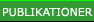
<style>
.page{position:relative;width:94px;height:22px;background:#339933}
.page>*{position:absolute;margin:0}
.t1{font:11px "Verdana";color:#ffffff}
</style>
<div class="page">
<p class="t1" style="left:3px;top:7px;width:90px;height:10px">PUBLIKATIONER</p>
</div>
